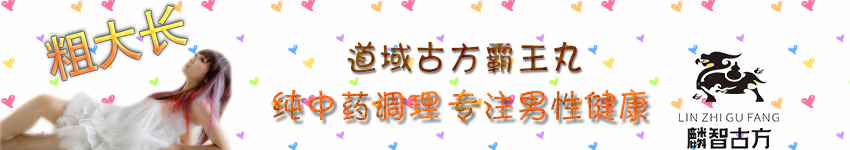
<style>
.page{position:relative;width:850px;height:150px;background:#fefefe}
.page>*{position:absolute;margin:0}
.t1{font:50px "AdobeHeitiStd-Regular";letter-spacing:-0.05em}
.t2{font:36px "Jkaton";letter-spacing:-0.05em}
</style>
<div class="page">
<p class="t1" style="left:45px;top:5px;width:143px;height:76px;rotate:-15deg">粗大长</p>
<p class="t2" style="left:347px;top:41px;width:235px;height:32px">道域古方霸王丸</p>
<p class="t2" style="left:273px;top:89px;width:375px;height:33px">纯中药调理 专注男性健康</p>
</div>
